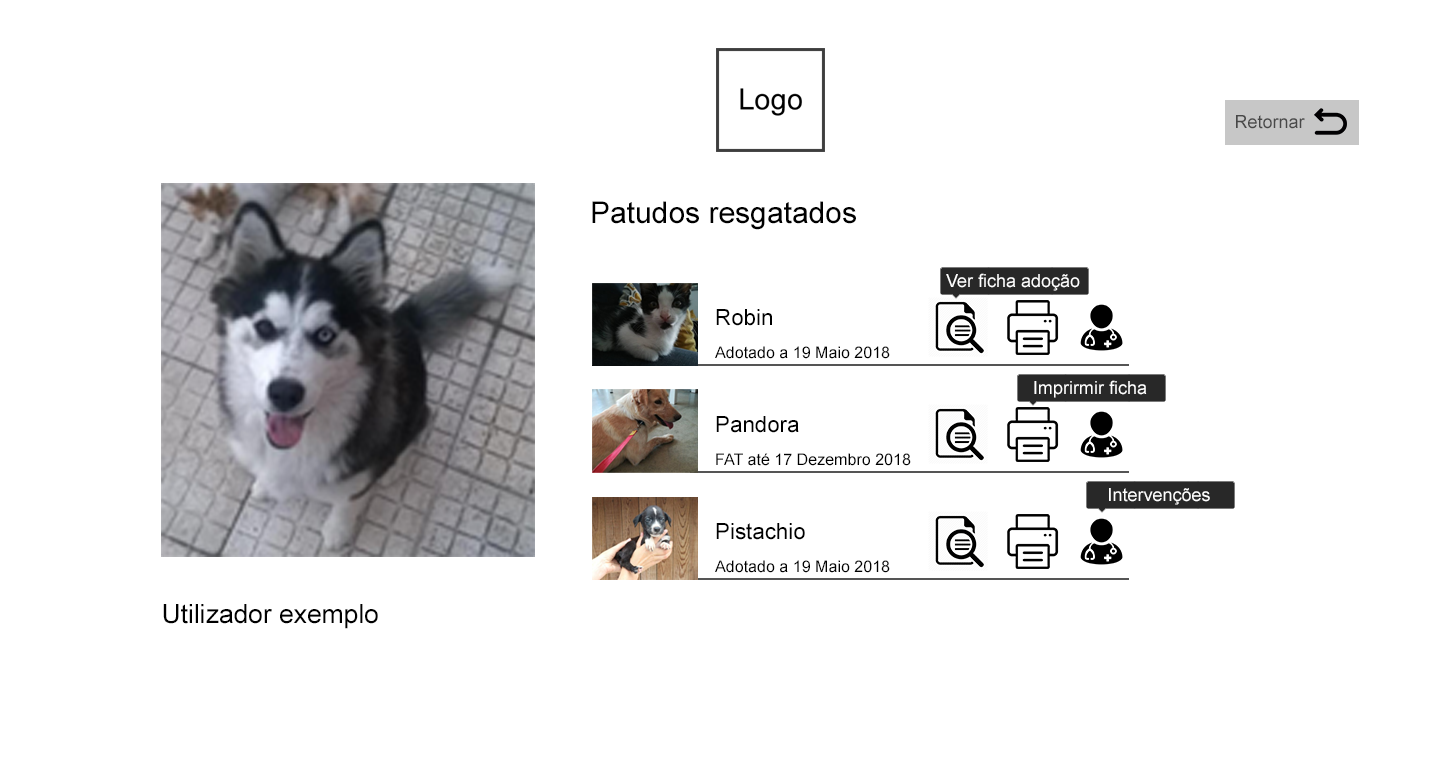
<style>
.page{position:relative;width:1431px;height:780px;background:#ffffff}
.page>*{position:absolute;margin:0}
.t1{font:18px "ArialMT";color:#484848}
.t2{font:30px "ArialMT";color:#000000}
.t3{font:18px "ArialMT";color:#ffffff}
.t4{font:22.3px "ArialMT";color:#000000}
.t5{font:16.1px "ArialMT";color:#000000}
.t6{font:26.4px "ArialMT";color:#000000}
</style>
<div class="page">
<p class="t1" style="left:1236px;top:115px;width:69px;height:14px">Retornar</p>
<p class="t2" style="left:592px;top:201px;width:264px;height:29px">Patudos resgatados</p>
<p class="t3" style="left:946px;top:273px;width:134px;height:18px">Ver ficha adoção</p>
<p class="t4" style="left:716px;top:309px;width:56px;height:17px">Robin</p>
<p class="t5" style="left:715px;top:346px;width:175px;height:13px">Adotado a 19 Maio 2018</p>
<p class="t3" style="left:1034px;top:380px;width:113px;height:18px">Imprirmir ficha</p>
<p class="t4" style="left:716px;top:416px;width:83px;height:17px">Pandora</p>
<p class="t5" style="left:716px;top:453px;width:195px;height:13px">FAT até 17 Dezembro 2018</p>
<p class="t3" style="left:1109px;top:488px;width:101px;height:17px">Intervenções</p>
<p class="t4" style="left:716px;top:523px;width:89px;height:17px">Pistachio</p>
<p class="t5" style="left:715px;top:560px;width:175px;height:13px">Adotado a 19 Maio 2018</p>
<p class="t6" style="left:163px;top:604px;width:215px;height:25px">Utilizador exemplo</p>
</div>
